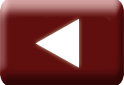
<style>
.page{position:relative;width:124px;height:85px;background:#600e0e}
.page>*{position:absolute;margin:0}
.t1{font:62.6px "Gulim";letter-spacing:-0.025em;color:#ffffff;scale:1.13 1}
</style>
<div class="page">
<p class="t1" style="left:35px;top:19px;width:44px;height:49px">◀</p>
</div>
